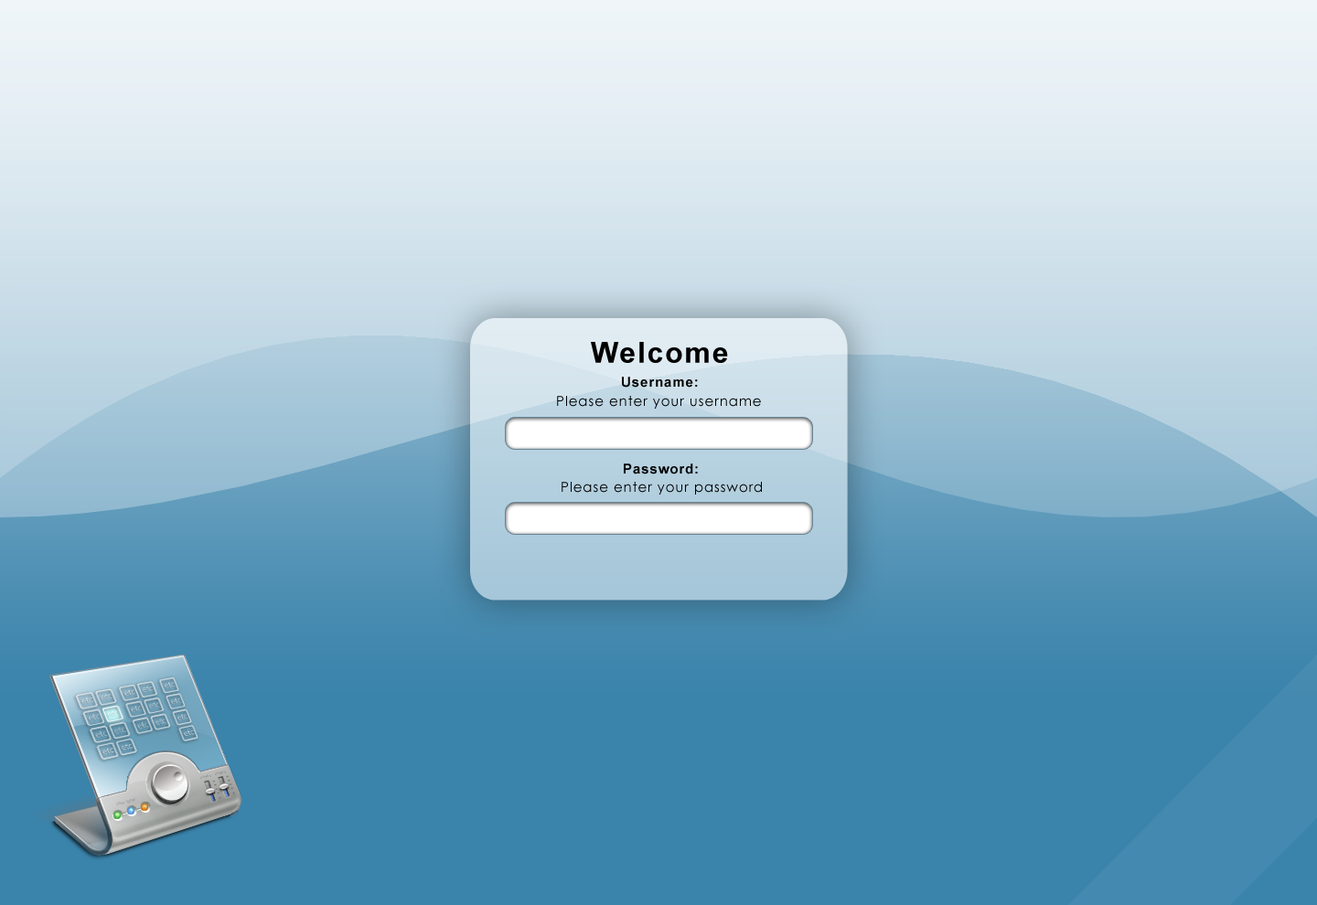
<style>
.page{position:relative;width:1317px;height:905px}
.page>*{position:absolute;margin:0}
.t1{font:29.1px "Arial-BoldMT";letter-spacing:0.06em;color:#000000}
.t2{font:13.7px "Arial-BoldMT";letter-spacing:0.06em;color:#000000}
.t3{font:13.7px "CenturyGothic";letter-spacing:0.06em;color:#000000}
</style>
<div class="page">
<p class="t1" style="left:591px;top:342px;width:137px;height:21px">Welcome</p>
<p class="t2" style="left:622px;top:377px;width:76px;height:11px">Username:</p>
<p class="t3" style="left:557px;top:396px;width:204px;height:13px">Please enter your username</p>
<p class="t2" style="left:624px;top:464px;width:74px;height:11px">Password:</p>
<p class="t3" style="left:562px;top:482px;width:200px;height:13px">Please enter your password</p>
</div>
